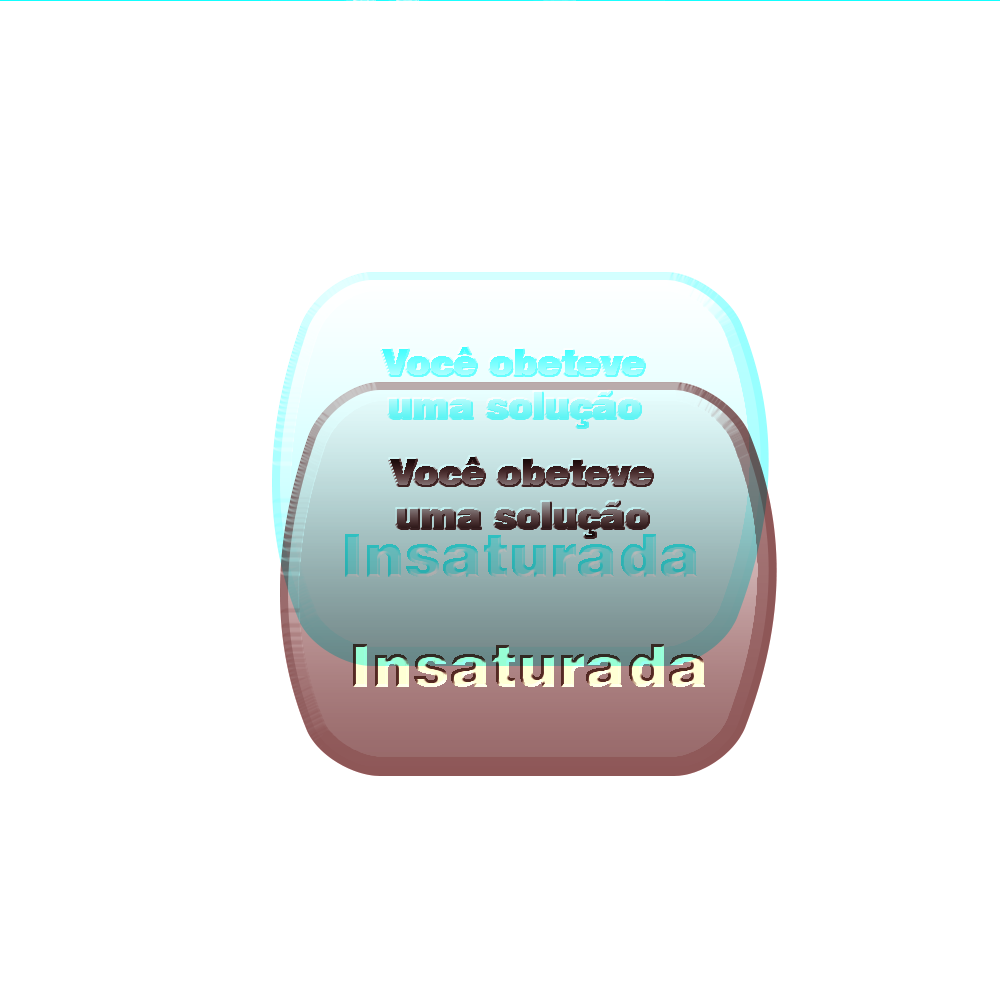
<style>
.page{position:relative;width:1000px;height:1000px;background:#ffffff}
.page>*{position:absolute;margin:0}
.t1{font:36px "Swiss721BT-Black"}
.t2{font:60.1px "Swiss721BT-Black"}
</style>
<div class="page">
<p class="t1" style="left:382px;top:346px;width:262px;height:80px;text-align:center">Você obeteve uma solução</p>
<p class="t2" style="left:345px;top:533px;width:352px;height:43px">Insaturada</p>
</div>
